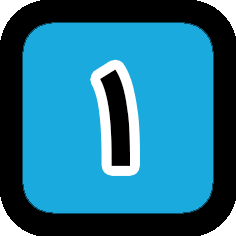
<style>
.page{position:relative;width:236px;height:236px;background:#1aaade}
.page>*{position:absolute;margin:0}
.t1{font:125px "IRANSansFaNum-Bold";color:#000000}
</style>
<div class="page">
<p class="t1" style="left:100px;top:69px;width:30px;height:97px">1</p>
</div>
